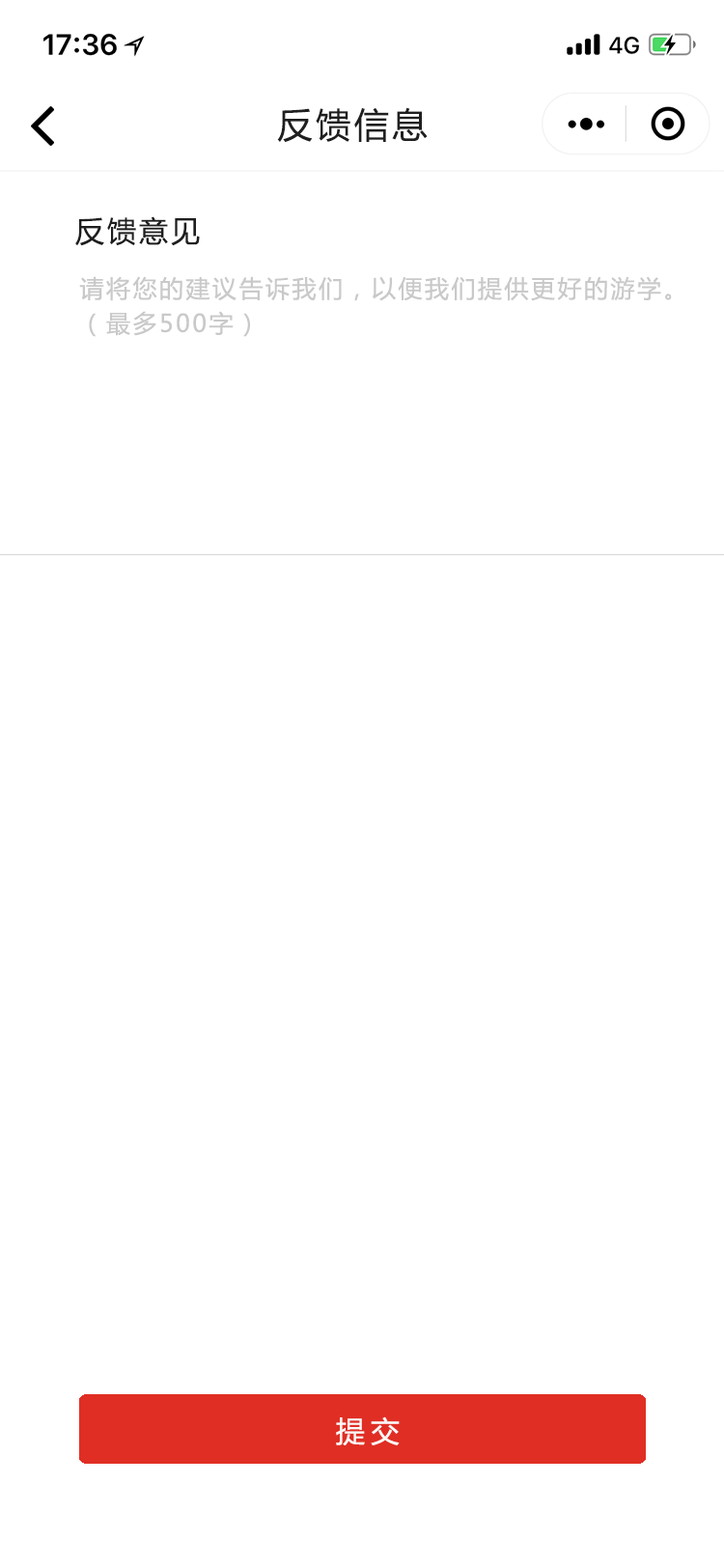
<style>
.page{position:relative;width:724px;height:1568px;background:#ffffff}
.page>*{position:absolute;margin:0}
.t1{font:34.8px "MicrosoftYaHei";letter-spacing:0.1em;color:#201f20}
.t2{font:29px "MicrosoftYaHei";letter-spacing:0.1em;color:#1f1e1e}
.t3{font:24.1px/34.8px "MicrosoftYaHei";letter-spacing:0.1em;color:#cac9c9}
.t4{font:29px "MicrosoftYaHei";letter-spacing:0.2em;color:#fcf8f8}
</style>
<div class="page">
<p class="t1" style="left:277px;top:107px;width:151px;height:35px">反馈信息</p>
<p class="t2" style="left:75px;top:216px;width:125px;height:30px">反馈意见</p>
<p class="t3" style="left:79px;top:276px;width:593px;height:61px">请将您的建议告诉我们，以便我们提供更好的游学。<br>（最多500字）</p>
<p class="t4" style="left:336px;top:1416px;width:64px;height:29px">提交</p>
</div>
